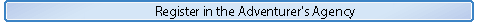
<style>
.page{position:relative;width:478px;height:22px;background:#d5e6f7}
.page>*{position:absolute;margin:0}
.t1{font:14px "MyriadPro-Regular";color:#000000}
</style>
<div class="page">
<p class="t1" style="left:156px;top:6px;width:199px;height:13px">Register in the Adventurer's Agency</p>
</div>
